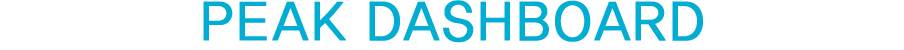
<style>
.page{position:relative;width:904px;height:50px;background:#ffffff}
.page>*{position:absolute;margin:0}
.t1{font:57.9px "YDGO22";letter-spacing:-0.055em;color:#01add2;font-weight:bold;scale:0.95 1}
</style>
<div class="page">
<p class="t1" style="left:203px;top:0px;width:500px;height:43px">PEAK DASHBOARD</p>
</div>
